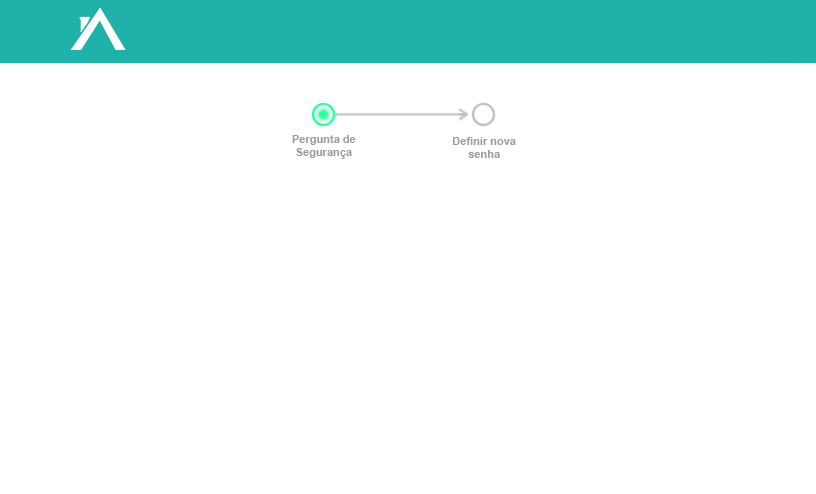
<style>
.page{position:relative;width:816px;height:494px;background:#ffffff}
.page>*{position:absolute;margin:0}
.t1{font:11.1px "Arial-BoldMT";color:#9c9c9c}
</style>
<div class="page">
<p class="t1" style="left:292px;top:135px;width:64px;height:24px;text-align:center">Pergunta de Segurança</p>
<p class="t1" style="left:452px;top:137px;width:64px;height:21px;text-align:center">Definir nova senha</p>
</div>
